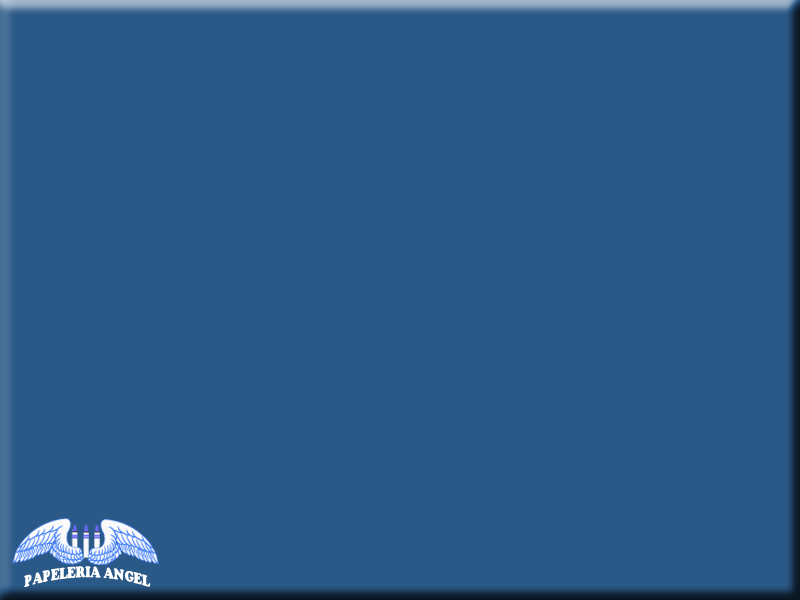
<style>
.page{position:relative;width:800px;height:600px;background:#2b5987}
.page>*{position:absolute;margin:0}
.t1{font:16.3px "CooperBlack";color:#ffffff;scale:0.75 1}
</style>
<div class="page">
<p class="t1" style="left:24px;top:566px;width:127px;height:21px">PAPELERIA ANGEL</p>
</div>
